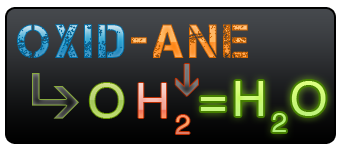
<style>
.page{position:relative;width:340px;height:150px}
.page>*{position:absolute;margin:0}
.t1{font:48px "Captureit";letter-spacing:0.1em}
.t2{font:48px "HelveticaCE-Regular";letter-spacing:0.1em;color:#bdd973}
.t3{font:48px "HelveticaCE-Regular";letter-spacing:0.1em}
.t4{font:48px "HelveticaCE-Regular";letter-spacing:0.1em;color:#cbf97c}
</style>
<div class="page">
<p class="t1" style="left:17px;top:23px;width:108px;height:35px">Oxid</p>
<p class="t1" style="left:131px;top:24px;width:117px;height:34px">-ane</p>
<p class="t2" style="left:89px;top:83px;width:35px;height:35px">O</p>
<p class="t3" style="left:138px;top:83px;width:52px;height:51px">H2</p>
<p class="t4" style="left:200px;top:81px;width:126px;height:51px">=H2O</p>
</div>
